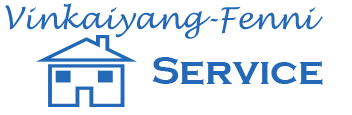
<style>
.page{position:relative;width:352px;height:115px;background:#ffffff}
.page>*{position:absolute;margin:0}
.t1{font:30px "LucidaHandwriting-Italic";color:#2369b8}
.t2{font:40px "CopperplateGothic-Bold";color:#2369b8}
</style>
<div class="page">
<p class="t1" style="left:5px;top:3px;width:318px;height:36px">Vinkaiyang-Fenni</p>
<p class="t2" style="left:152px;top:57px;width:171px;height:28px">Service</p>
</div>
